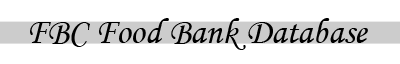
<style>
.page{position:relative;width:400px;height:64px;background:#ffffff}
.page>*{position:absolute;margin:0}
.t1{font:36px "MonotypeCorsiva";color:#000000}
</style>
<div class="page">
<p class="t1" style="left:30px;top:18px;width:338px;height:32px">FBC Food Bank Database</p>
</div>
